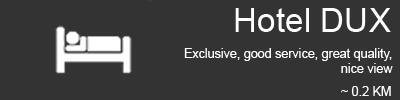
<style>
.page{position:relative;width:400px;height:100px;background:#333333}
.page>*{position:absolute;margin:0}
.t1{font:33.3px "ArialMT";color:#ffffff}
.t2{font:12.5px "ArialMT";color:#ffffff}
</style>
<div class="page">
<p class="t1" style="left:235px;top:8px;width:156px;height:24px">Hotel DUX</p>
<p class="t2" style="left:184px;top:48px;width:209px;height:25px;text-align:right">Exclusive, good service, great quality, nice view</p>
<p class="t2" style="left:341px;top:86px;width:50px;height:10px">~ 0.2 KM</p>
</div>
